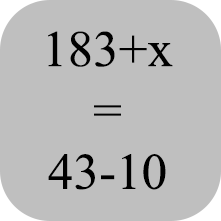
<style>
.page{position:relative;width:221px;height:221px;background:#bfbfbf}
.page>*{position:absolute;margin:0}
.t1{font:51.1px "TimesNewRomanPSMT";color:#000000}
</style>
<div class="page">
<p class="t1" style="left:48px;top:31px;width:125px;height:159px;text-align:center">183+x<br>=<br>43-10</p>
</div>
